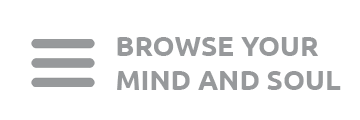
<style>
.page{position:relative;width:360px;height:120px;background:#ffffff}
.page>*{position:absolute;margin:0}
.t1{font:28px "Ubuntu-Bold";color:#97999b}
</style>
<div class="page">
<p class="t1" style="left:117px;top:37px;width:224px;height:53px">BROWSE YOUR<br>MIND AND SOUL</p>
</div>
